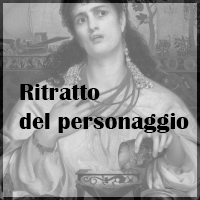
<style>
.page{position:relative;width:200px;height:200px}
.page>*{position:absolute;margin:0}
.t1{font:24px "BritannicBold";color:#000000}
</style>
<div class="page">
<p class="t1" style="left:19px;top:84px;width:170px;height:49px">Ritratto<br>del personaggio</p>
</div>
